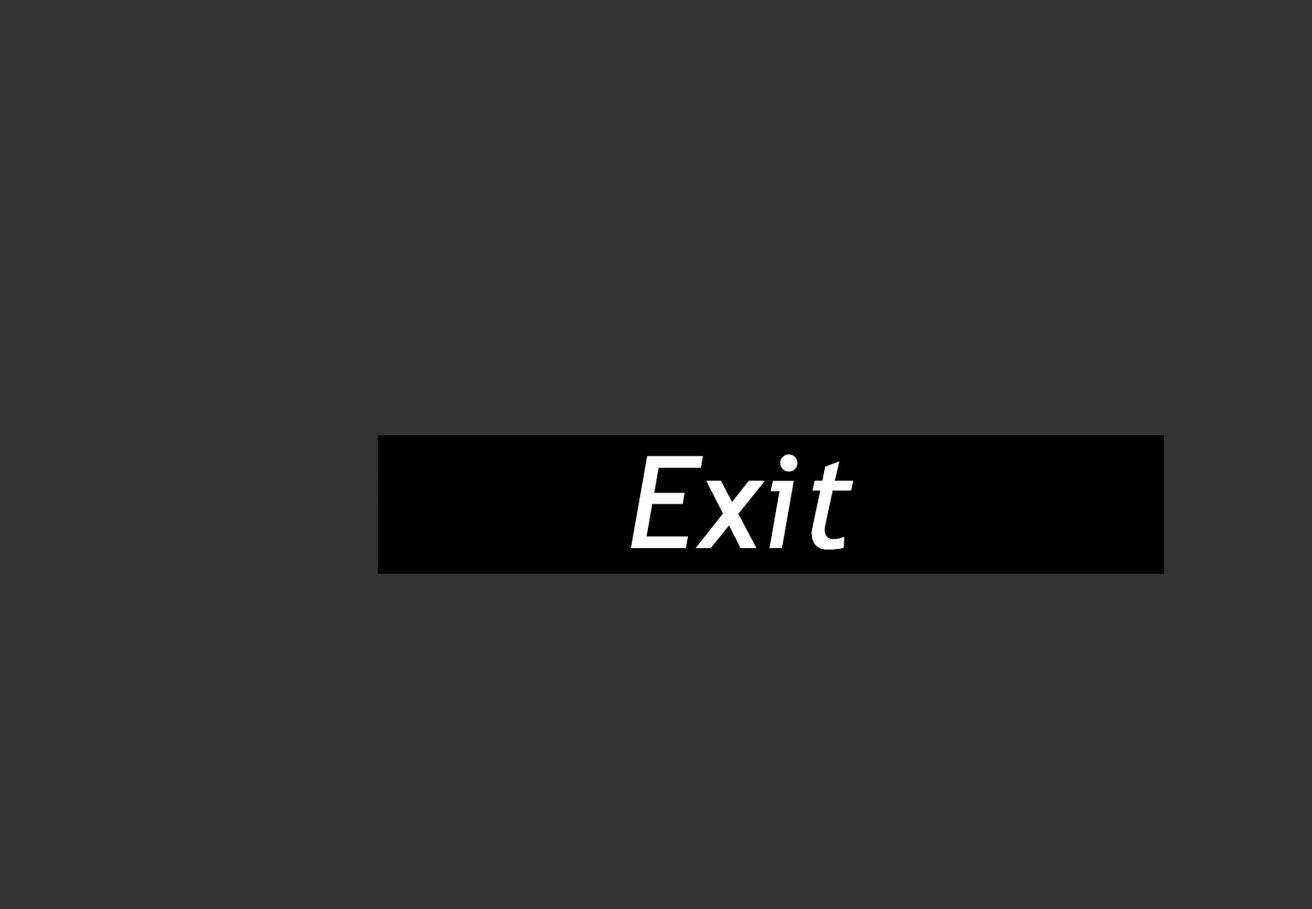
<style>
.page{position:relative;width:1312px;height:909px;background:#333333}
.page>*{position:absolute;margin:0}
.t1{font:128.2px "TrebuchetMS-Italic";color:#ffffff}
</style>
<div class="page">
<p class="t1" style="left:631px;top:454px;width:222px;height:96px">Exit</p>
</div>
